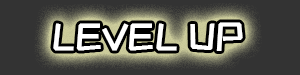
<style>
.page{position:relative;width:300px;height:75px;background:#333333}
.page>*{position:absolute;margin:0}
.t1{font:37px "ZCOOLKuaiLe-Regular";color:#ffffff;font-weight:bold}
</style>
<div class="page">
<p class="t1" style="left:53px;top:22px;width:190px;height:29px">LEVEL UP</p>
</div>
